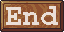
<style>
.page{position:relative;width:64px;height:32px;background:#8f5030}
.page>*{position:absolute;margin:0}
.t1{font:30px "Courier-Bold";color:#ebe0d7}
</style>
<div class="page">
<p class="t1" style="left:6px;top:6px;width:52px;height:19px">End</p>
</div>
